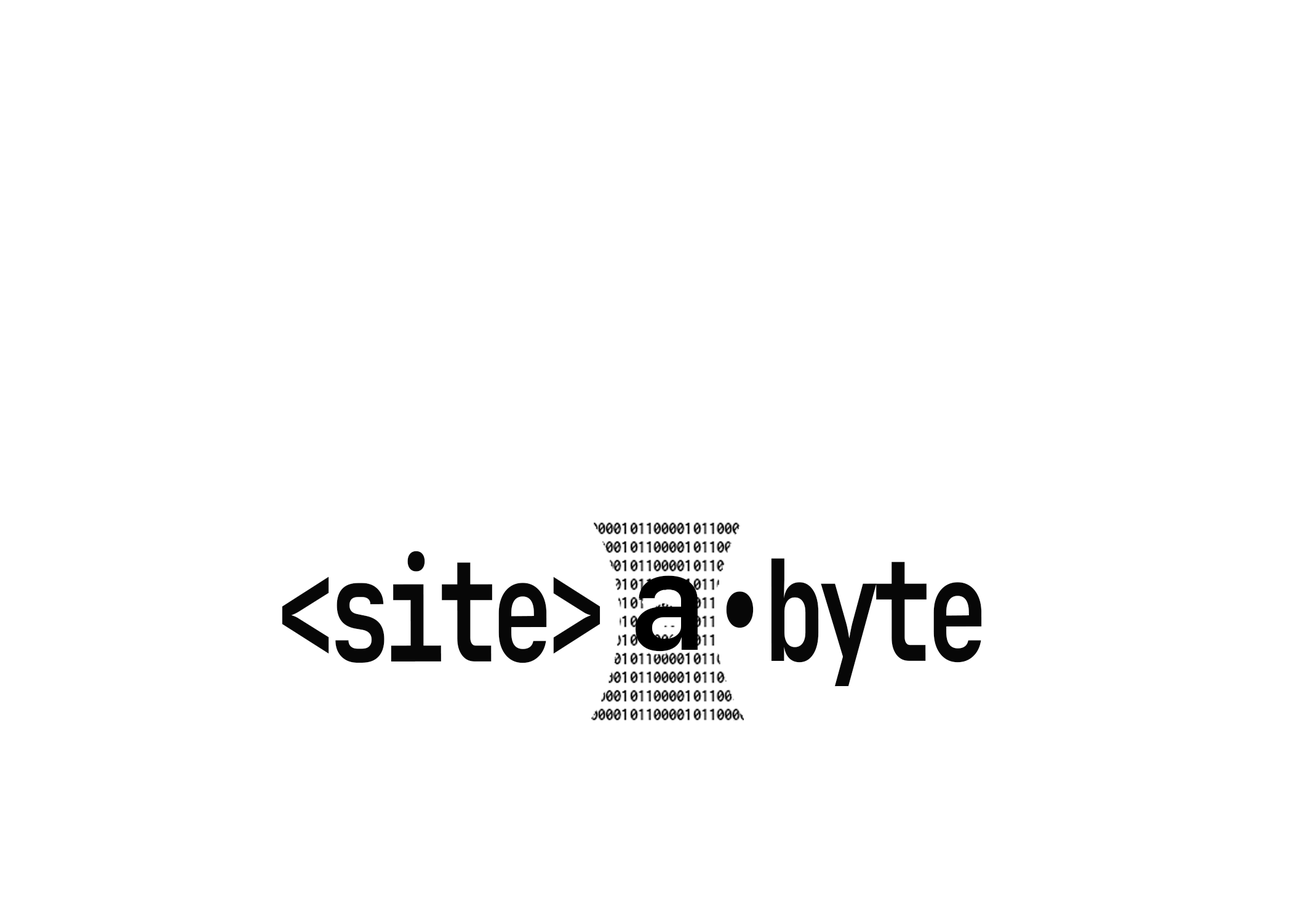
<style>
.page{position:relative;width:1292px;height:923px;background:#ffffff}
.page>*{position:absolute;margin:0}
.t1{font:140.2px "JetBrainsMono-Bold";letter-spacing:-0.075em;color:#070707;scale:0.74 1}
.t2{font:132.1px "JetBrainsMono-Bold";color:#000000}
</style>
<div class="page">
<p class="t1" style="left:282px;top:551px;width:700px;height:136px">&lt;site&gt;  •byte</p>
<p class="t2" style="left:636px;top:575px;width:62px;height:77px">a</p>
</div>
